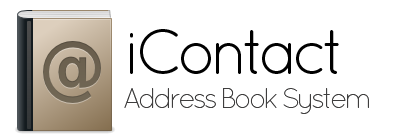
<style>
.page{position:relative;width:402px;height:140px;background:#ffffff}
.page>*{position:absolute;margin:0}
.t1{font:63px "QuicksandBook-Regular";letter-spacing:-0.1em;color:#000000}
.t2{font:27.8px "QuicksandLight-Regular";letter-spacing:-0.1em;color:#3f3e3e}
</style>
<div class="page">
<p class="t1" style="left:130px;top:29px;width:209px;height:45px">iContact</p>
<p class="t2" style="left:124px;top:88px;width:245px;height:26px">Address Book System</p>
</div>
